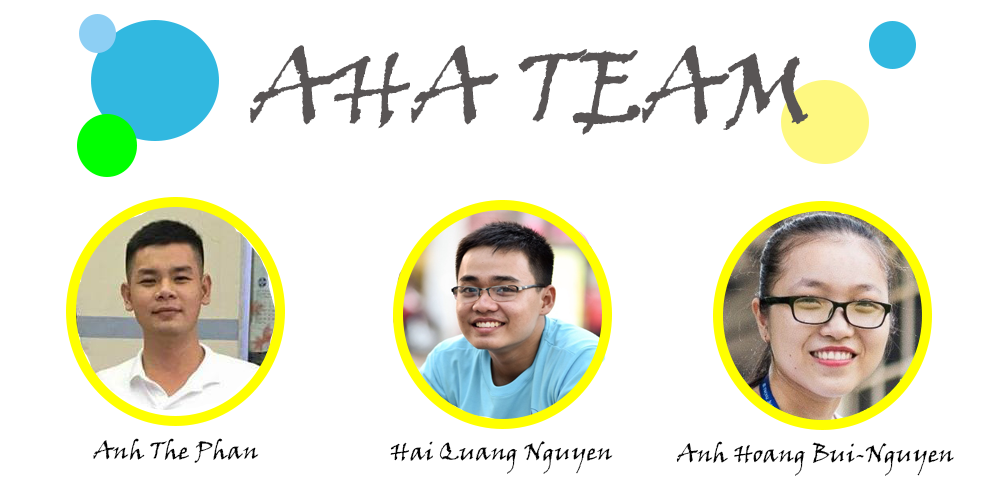
<style>
.page{position:relative;width:1000px;height:500px;background:#ffffff}
.page>*{position:absolute;margin:0}
.t1{font:100px "VinerHandITC";color:#595555}
.t2{font:24px "VinerHandITC";color:#050505}
</style>
<div class="page">
<p class="t1" style="left:250px;top:45px;width:559px;height:90px">AHA TEAM</p>
<p class="t2" style="left:93px;top:438px;width:166px;height:25px">Anh The Phan</p>
<p class="t2" style="left:390px;top:441px;width:223px;height:33px">Hai Quang Nguyen</p>
<p class="t2" style="left:676px;top:441px;width:278px;height:35px">Anh Hoang Bui-Nguyen</p>
</div>
